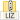
<style>
.page{position:relative;width:20px;height:20px;background:#ffffff}
.page>*{position:absolute;margin:0}
.t1{font:7px "SegoeUI";color:#60605e}
</style>
<div class="page">
<p class="t1" style="left:5px;top:12px;width:10px;height:7px">LIZ</p>
</div>
